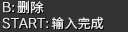
<style>
.page{position:relative;width:128px;height:32px;background:#333333}
.page>*{position:absolute;margin:0}
.t1{font:13px "SourceHanSansSC-Regular";color:#e7e7e7}
.t2{font:13px "SourceHanSansSC-Regular";color:#e9e9e9}
</style>
<div class="page">
<p class="t1" style="left:17px;top:0px;width:27px;height:14px">删除</p>
<p class="t2" style="left:51px;top:16px;width:53px;height:14px">输入完成</p>
</div>
